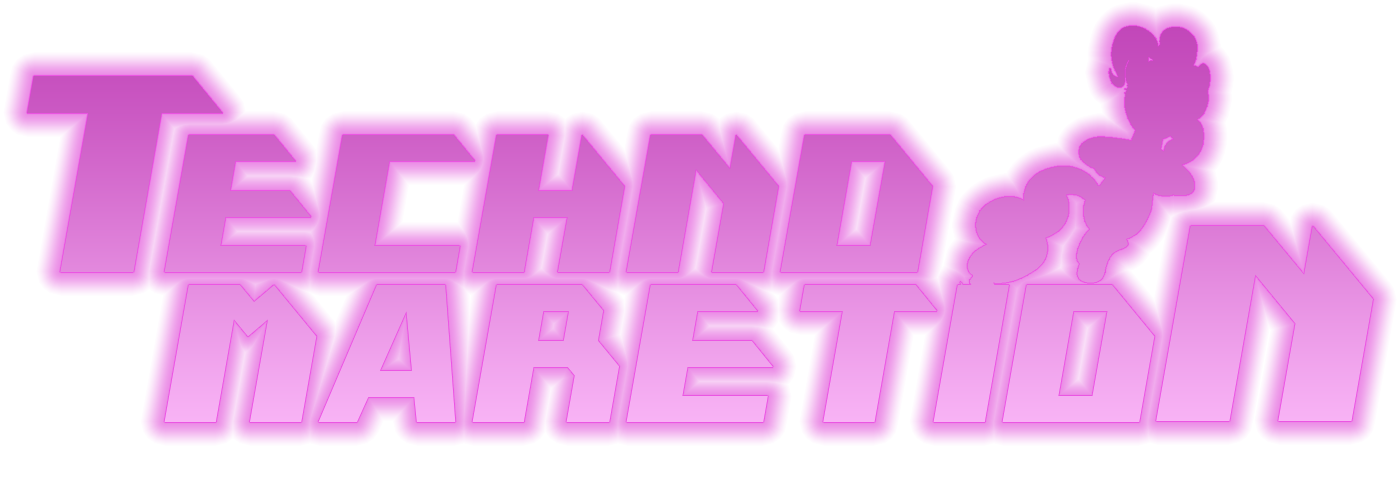
<style>
.page{position:relative;width:1400px;height:500px;background:#ffffff}
.page>*{position:absolute;margin:0}
.t1{font:250px "Techno-tron";color:#d063c9;font-style:italic}
.t2{font:175px/150px "Techno-tron";font-style:italic}
.t3{font:250px "Techno-tron";color:#eb99e7;font-style:italic}
</style>
<div class="page">
<p class="t1" style="left:27px;top:76px;width:196px;height:196px">T</p>
<p class="t2" style="left:164px;top:135px;width:991px;height:287px">ECHNO<br>  MARETIO</p>
<p class="t3" style="left:1156px;top:226px;width:217px;height:195px">N</p>
</div>
